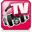
<style>
.page{position:relative;width:32px;height:32px}
.page>*{position:absolute;margin:0}
.t1{font:13.1px "Impact";letter-spacing:-0.1em;color:#ffffff;text-transform:uppercase;scale:1.52 1}
</style>
<div class="page">
<p class="t1" style="left:10px;top:2px;width:19px;height:12px;rotate:-5deg;opacity:0.9">TV</p>
</div>
